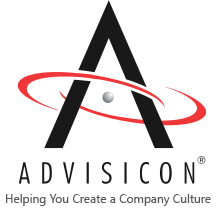
<style>
.page{position:relative;width:216px;height:220px;background:#ffffff}
.page>*{position:absolute;margin:0}
.t1{font:12px "SegoeUI";color:#58595b}
</style>
<div class="page">
<p class="t1" style="left:6px;top:194px;width:205px;height:12px">Helping You Create a Company Culture</p>
</div>
